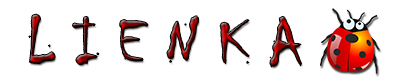
<style>
.page{position:relative;width:400px;height:82px;background:#ffffff}
.page>*{position:absolute;margin:0}
.t1{font:66.7px "Chiller-Regular";letter-spacing:0.3em;text-transform:uppercase}
</style>
<div class="page">
<p class="t1" style="left:29px;top:14px;width:272px;height:53px">Lienka</p>
</div>
